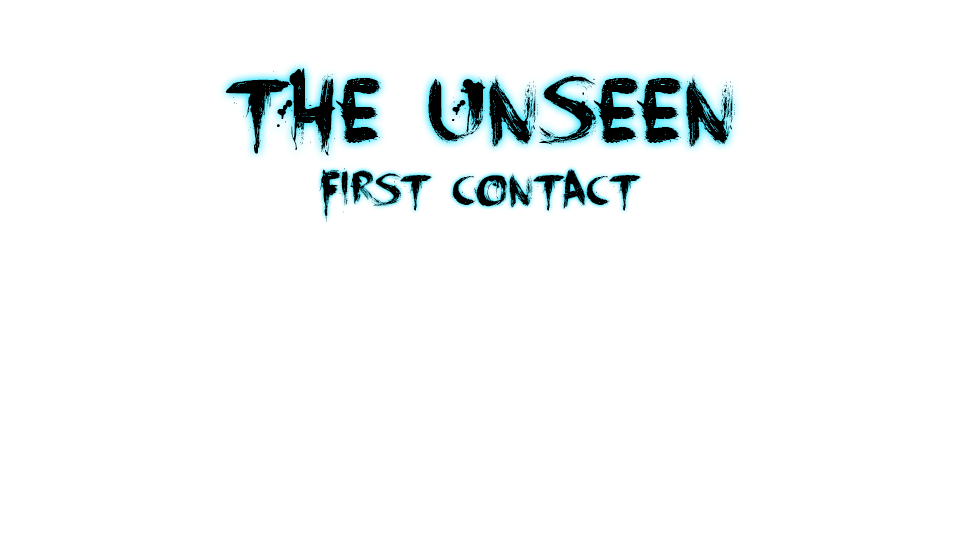
<style>
.page{position:relative;width:960px;height:540px;background:#ffffff}
.page>*{position:absolute;margin:0}
.t1{font:100px "FaceYourFears";color:#0e0e0e}
.t2{font:48px "FaceYourFears";color:#0e0e0e}
</style>
<div class="page">
<p class="t1" style="left:225px;top:65px;width:510px;height:91px">The Unseen</p>
<p class="t2" style="left:319px;top:168px;width:322px;height:54px">First Contact</p>
</div>
